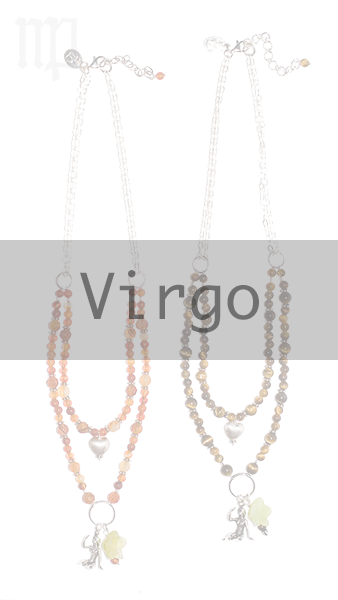
<style>
.page{position:relative;width:338px;height:600px;background:#ffffff}
.page>*{position:absolute;margin:0}
.t1{font:61px "Ayuthaya";color:#707070}
</style>
<div class="page">
<p class="t1" style="left:80px;top:270px;width:179px;height:63px">Virgo</p>
</div>
